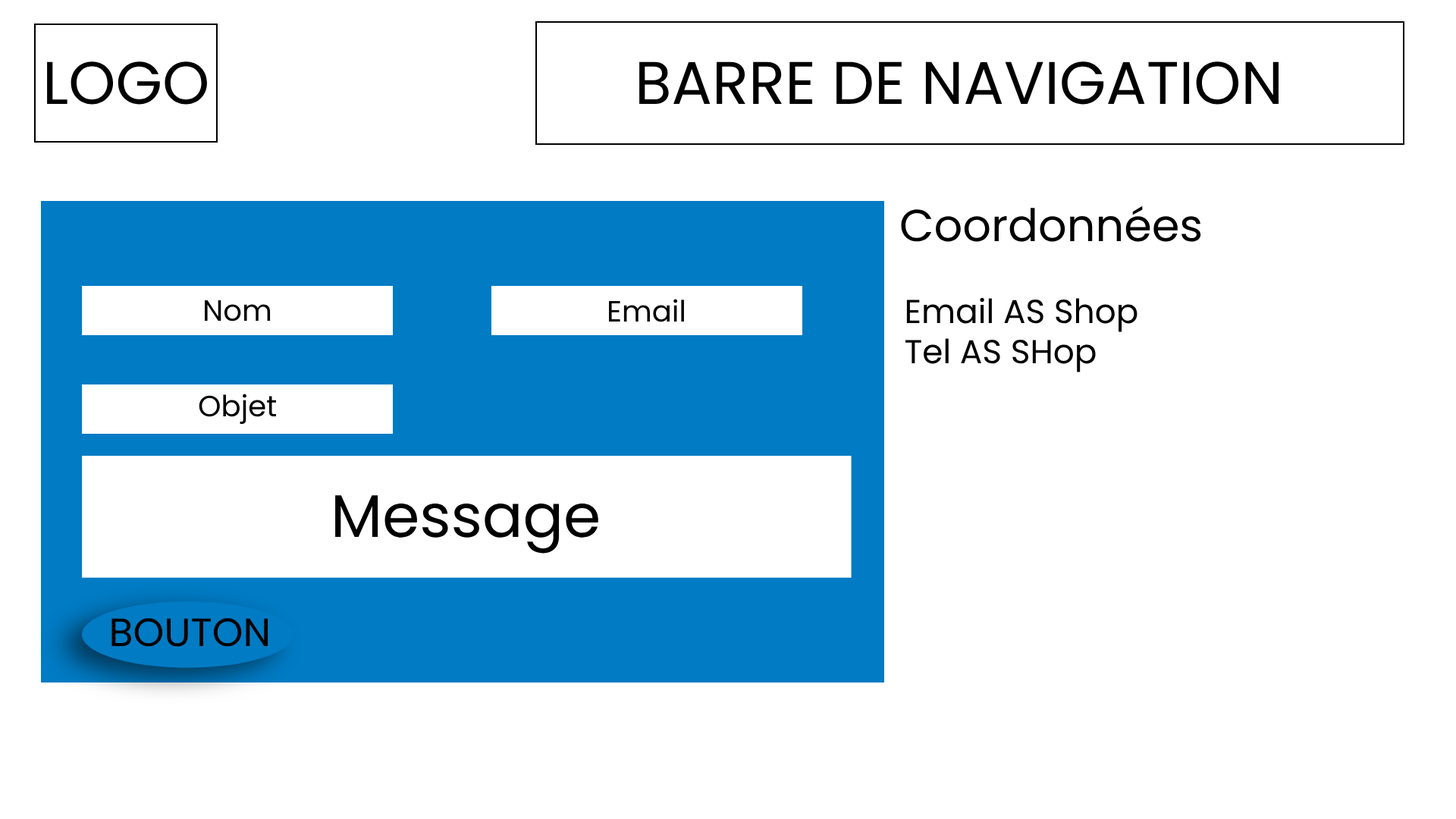
<style>
.page{position:relative;width:1456px;height:819px;background:#ffffff}
.page>*{position:absolute;margin:0}
.t1{font:60.1px "Poppins-Regular";color:#000000}
.t2{font:44.7px "Poppins-Regular";color:#000000}
.t3{font:29.3px "Poppins-Regular";color:#000000}
.t4{font:33.2px "Poppins-Regular";color:#000000}
.t5{font:39.5px "Poppins-Regular";color:#000000}
</style>
<div class="page">
<p class="t1" style="left:47px;top:61px;width:160px;height:44px">LOGO</p>
<p class="t1" style="left:639px;top:61px;width:640px;height:44px">BARRE DE NAVIGATION</p>
<p class="t2" style="left:901px;top:206px;width:300px;height:36px">Coordonnées</p>
<p class="t3" style="left:205px;top:300px;width:66px;height:22px">Nom</p>
<p class="t3" style="left:609px;top:299px;width:75px;height:23px">Email</p>
<p class="t4" style="left:905px;top:297px;width:232px;height:75px">Email AS Shop<br>Tel AS SHop</p>
<p class="t3" style="left:199px;top:394px;width:78px;height:31px">Objet</p>
<p class="t1" style="left:335px;top:495px;width:263px;height:59px">Message</p>
<p class="t5" style="left:111px;top:618px;width:157px;height:29px">BOUTON</p>
</div>
